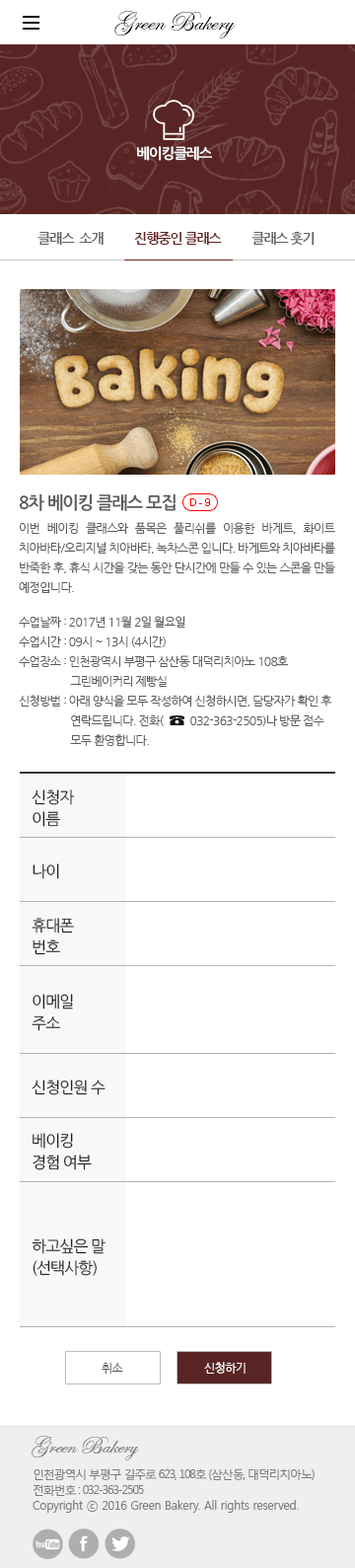
<style>
.page{position:relative;width:355px;height:1568px;background:#ffffff}
.page>*{position:absolute;margin:0}
.t1{font:26.6px "EdwardianScriptITC";color:#000000}
.t2{font:14.4px "NanumGothicBold";letter-spacing:-0.075em;color:#ffffff}
.t3{font:13.8px "NanumGothicBold";letter-spacing:-0.075em;color:#672222}
.t4{font:13.8px "NanumGothicBold";letter-spacing:-0.075em;color:#626262}
.t5{font:17.6px "NanumGothicBold";letter-spacing:-0.055em;color:#5b5b5b}
.t6{font:10.9px "ArialMT";letter-spacing:-0.055em;color:#ff0000;scale:0.96 1}
.t7{font:11.8px/19.7px "NanumGothic";letter-spacing:-0.055em;color:#5a5a5a}
.t8{font:11.8px/14.8px "NanumGothic";letter-spacing:-0.055em;color:#5a5a5a}
.t9{font:15.8px/21.7px "NanumGothic";letter-spacing:-0.055em;color:#222222}
.t10{font:15.8px "NanumGothic";letter-spacing:-0.055em;color:#222222}
.t11{font:11.8px "NanumGothic";letter-spacing:-0.055em;color:#ffffff}
.t12{font:11.8px "NanumGothic";letter-spacing:-0.055em;color:#535353}
.t13{font:23.7px "EdwardianScriptITC";color:#827c79}
.t14{font:11.8px/15.8px "MalgunGothicRegular";letter-spacing:-0.1em;color:#827c79}
.t15{font:11.8px/15.8px "MalgunGothicRegular";letter-spacing:-0.025em;color:#827c79}
</style>
<div class="page">
<p class="t1" style="left:114px;top:11px;width:122px;height:27px">Green Bakery</p>
<p class="t2" style="left:137px;top:146px;width:75px;height:15px">베이킹클레스</p>
<p class="t3" style="left:37px;top:231px;width:278px;height:15px"><span class="t4">클래스  소개           </span>진행중인 클래스<span class="t4">           클래스 훗기</span></p>
<p class="t5" style="left:19px;top:493px;width:157px;height:18px">8차 베이킹 클래스 모집</p>
<p class="t6" style="left:190px;top:498px;width:20px;height:8px">D - 9</p>
<p class="t7" style="left:19px;top:522px;width:317px;height:224px;text-align:justify">이번 베이킹 클래스와 품목은 풀리쉬를 이용한 바게트, 화이트 치아바타/오리지널 치아바타, 녹차스콘 입니다. 바게트와 치아바타를 반죽한 후, 휴식 시간을 갖는 동안 단시간에 만들 수 있는 스콘을 만들 예정입니다.<br><span class="t8"><br>수</span>업날짜 : 2017년 11월 2일 월요일<br>수업시간 : 09시 ~ 13시 (4시간)<br>수업장소 : 인천광역시 부평구 삼산동 대덕리치아노 108호          그린베이커리 제빵실<br>신청방법 : 아래 양식을 모두 작성하여 신청하시면, 담당자가 확인 후<br>       연락드립니다. 전화(          032-363-2505)나 방문 접수<br>       모두 환영합니다.</p>
<p class="t9" style="left:32px;top:789px;width:43px;height:38px">신청자<br>이름</p>
<p class="t10" style="left:33px;top:863px;width:26px;height:16px">나이</p>
<p class="t9" style="left:32px;top:918px;width:42px;height:37px">휴대폰<br>번호</p>
<p class="t9" style="left:32px;top:994px;width:41px;height:37px">이메일<br>주소</p>
<p class="t10" style="left:32px;top:1080px;width:74px;height:15px">신청인원 수</p>
<p class="t9" style="left:33px;top:1133px;width:59px;height:37px">베이킹<br>경험 여부</p>
<p class="t9" style="left:32px;top:1238px;width:74px;height:38px">하고싶은 말<br>(선택사항)</p>
<p class="t11" style="left:204px;top:1362px;width:42px;height:12px">신청하기</p>
<p class="t12" style="left:102px;top:1363px;width:21px;height:11px">취소</p>
<p class="t13" style="left:32px;top:1436px;width:107px;height:24px">Green Bakery</p>
<p class="t14" style="left:33px;top:1468px;width:282px;height:45px">인천광역시 부평구 길주로 623, 108호 (삼산동, 대덕리치아노)<br>전화번호 : 032-363-2505<br><span class="t15">Copyright ⓒ 2016 Green Bakery. All rights reserved.</span></p>
</div>
